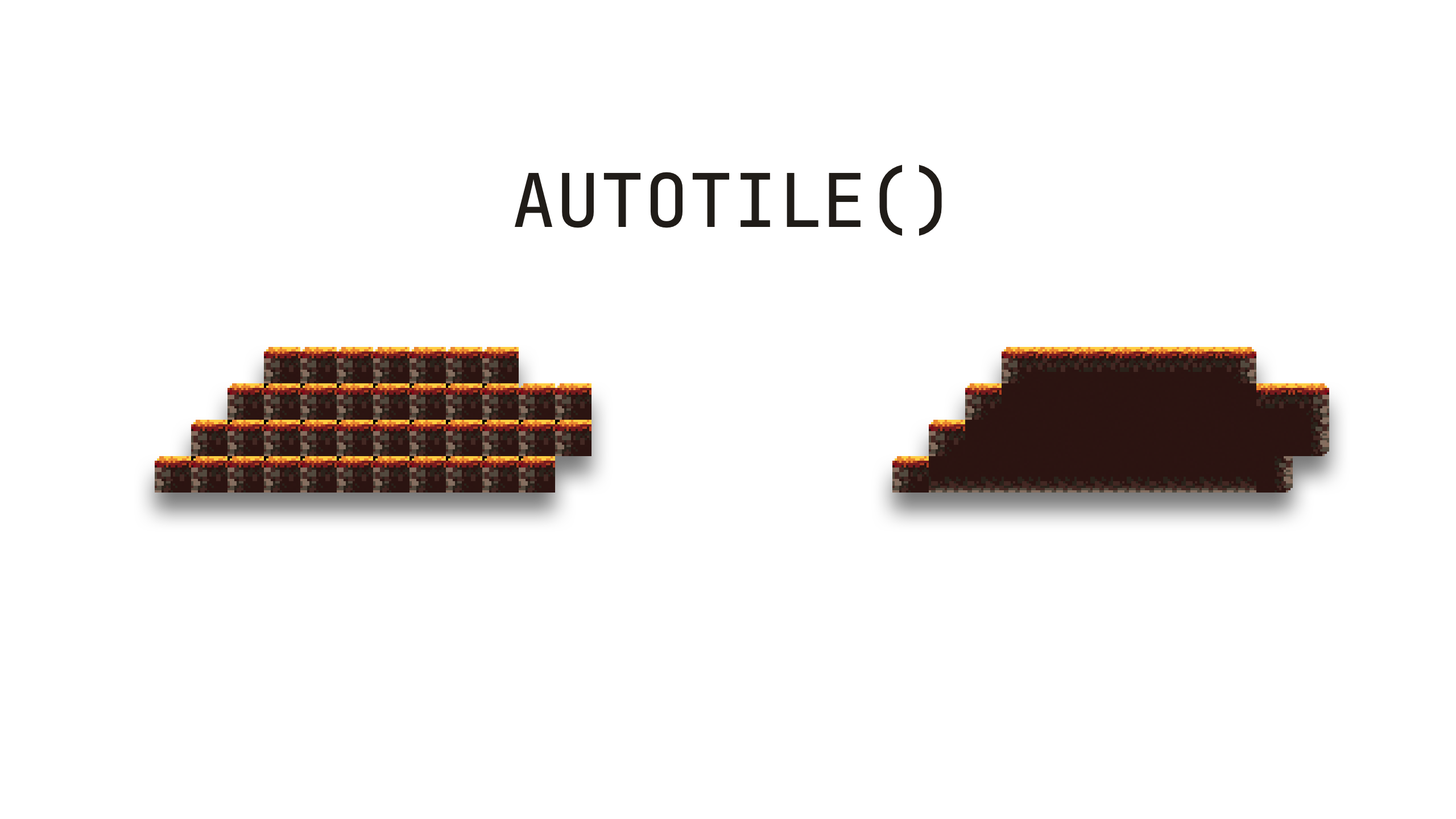
<style>
.page{position:relative;width:1456px;height:819px;background:#ffffff}
.page>*{position:absolute;margin:0}
.t1{font:73.9px "JetBrainsMono-Medium";color:#201c18}
</style>
<div class="page">
<p class="t1" style="left:515px;top:164px;width:427px;height:72px">AUTOTILE()</p>
</div>
